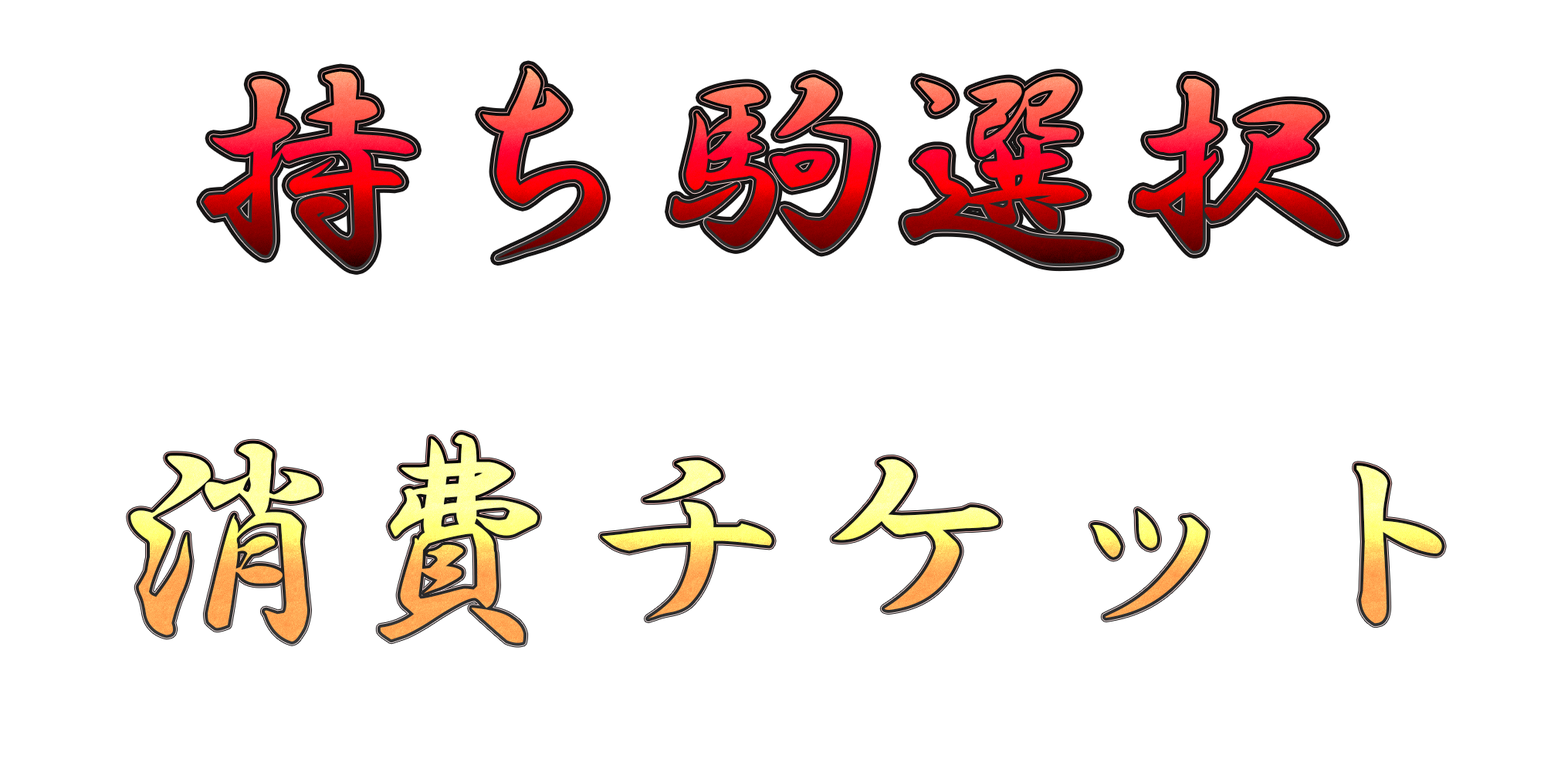
<style>
.page{position:relative;width:1544px;height:772px;background:#ffffff}
.page>*{position:absolute;margin:0}
.t1{font:231.6px "HGSGyoshotai"}
</style>
<div class="page">
<p class="t1" style="left:204px;top:68px;width:1139px;height:199px">持ち駒選択</p>
<p class="t1" style="left:130px;top:435px;width:1312px;height:208px">消費チケット</p>
</div>
